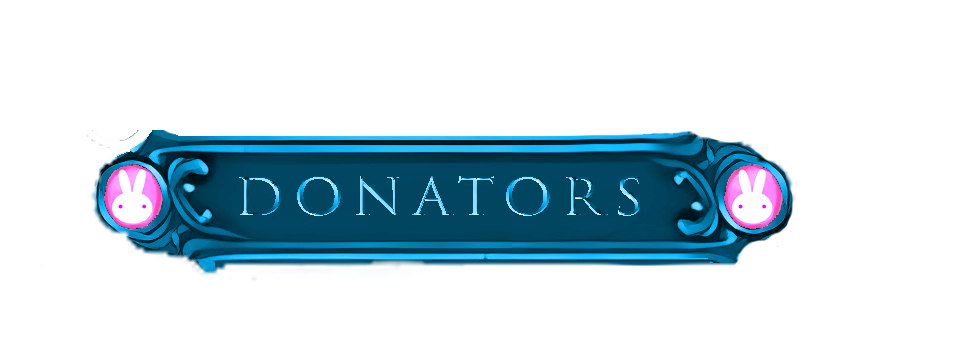
<style>
.page{position:relative;width:980px;height:352px;background:#ffffff}
.page>*{position:absolute;margin:0}
.t1{font:49.3px "TrajanColor-Concept";letter-spacing:0.15em;font-weight:bold;scale:1.1 1}
</style>
<div class="page">
<p class="t1" style="left:239px;top:176px;width:401px;height:40px">donators</p>
</div>
